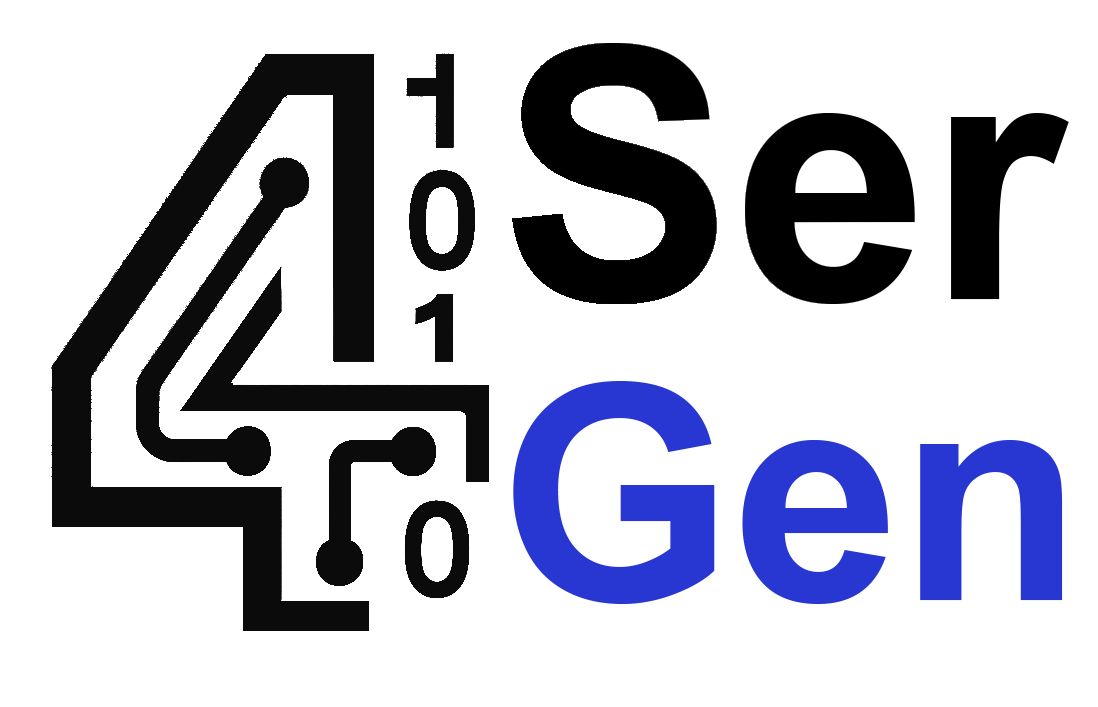
<style>
.page{position:relative;width:1098px;height:707px;background:#ffffff}
.page>*{position:absolute;margin:0}
.t1{font:350px "Arial-BoldMT";color:#000000}
.t2{font:300px "Arial-BoldMT";color:#2837d2}
</style>
<div class="page">
<p class="t1" style="left:512px;top:43px;width:557px;height:261px">Ser</p>
<p class="t2" style="left:513px;top:381px;width:550px;height:223px">Gen</p>
</div>
